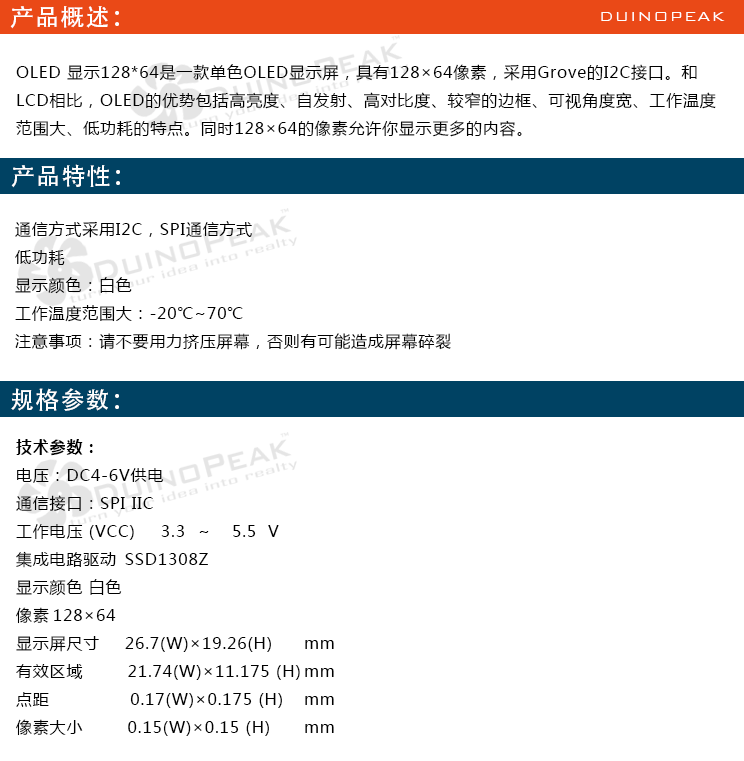
<style>
.page{position:relative;width:744px;height:761px;background:#ffffff}
.page>*{position:absolute;margin:0}
.t1{font:24px "AdobeHeitiStd-Regular";letter-spacing:0.05em;color:#ffffff}
.t2{font:18px "BankGothicBT-Light";letter-spacing:0.05em;color:#ffffff}
.t3{font:16px "MicrosoftYaHei";letter-spacing:0.05em;color:#000000}
.t4{font:16px "MicrosoftYaHei-Bold";letter-spacing:0.05em;color:#000000}
</style>
<div class="page">
<p class="t1" style="left:10px;top:6px;width:109px;height:23px">产品概述：</p>
<p class="t2" style="left:601px;top:12px;width:124px;height:9px">DUINOPEAK</p>
<p class="t3" style="left:16px;top:64px;width:700px;height:73px">OLED 显示128*64是一款单色OLED显示屏，具有128×64像素，采用Grove的I2C接口。和<br>LCD相比，OLED的优势包括高亮度、自发射、高对比度、较窄的边框、可视角度宽、工作温度<br>范围大、低功耗的特点。同时128×64的像素允许你显示更多的内容。</p>
<p class="t1" style="left:11px;top:164px;width:109px;height:24px">产品特性：</p>
<p class="t3" style="left:15px;top:221px;width:436px;height:129px">通信方式采用I2C，SPI通信方式<br>低功耗<br>显示颜色：白色<br>工作温度范围大：-20℃~70℃<br>注意事项：请不要用力挤压屏幕，否则有可能造成屏幕碎裂</p>
<p class="t1" style="left:11px;top:388px;width:108px;height:23px">规格参数：</p>
<p class="t3" style="left:16px;top:439px;width:318px;height:297px"><span class="t4">技术参数：<br></span>电压：DC4-6V供电<br>通信接口：SPI IIC<br>工作电压 (VCC) 3.3 ～ 5.5 V<br>集成电路驱动 SSD1308Z <br>显示颜色 白色 <br>像素 128×64 <br>显示屏尺寸 26.7(W)×19.26(H) mm<br>有效区域        21.74(W)×11.175 (H) mm<br>点距               0.17(W)×0.175 (H) mm<br>像素大小        0.15(W)×0.15 (H) mm</p>
</div>
